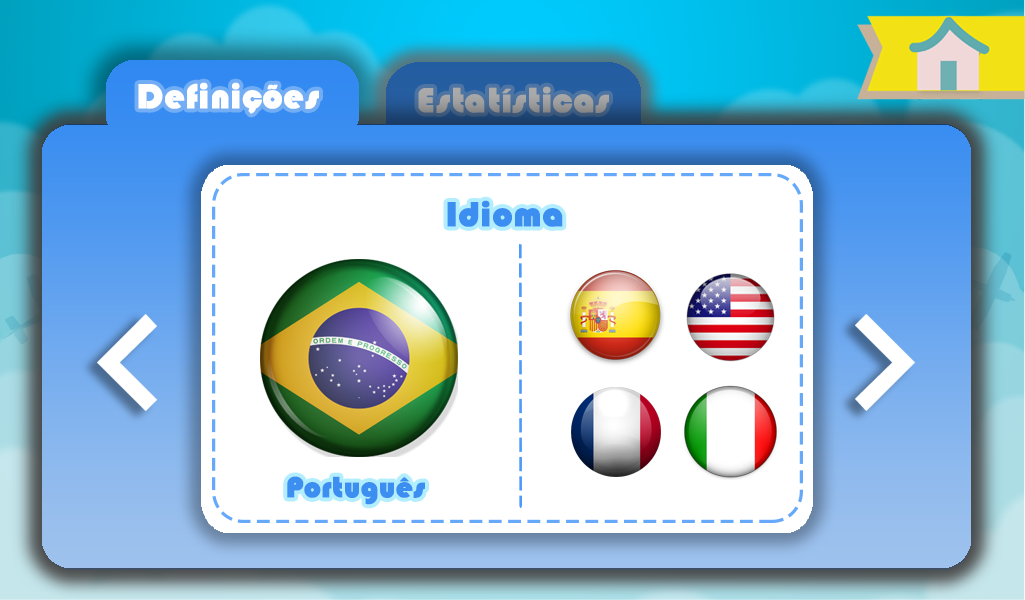
<style>
.page{position:relative;width:1025px;height:600px;background:#ffffff}
.page>*{position:absolute;margin:0}
.t1{font:36px "Blippo-Heavy";color:#ffffff;font-weight:bold}
.t2{font:36px "Blippo-Heavy";color:#3c8ef0;font-weight:bold}
.t3{font:30px "Blippo-Heavy";color:#3c8ef0;font-weight:bold}
</style>
<div class="page">
<p class="t1" style="left:138px;top:82px;width:181px;height:32px">Definições</p>
<p class="t2" style="left:447px;top:200px;width:116px;height:27px">Idioma</p>
<p class="t3" style="left:287px;top:476px;width:138px;height:29px">Português</p>
</div>
